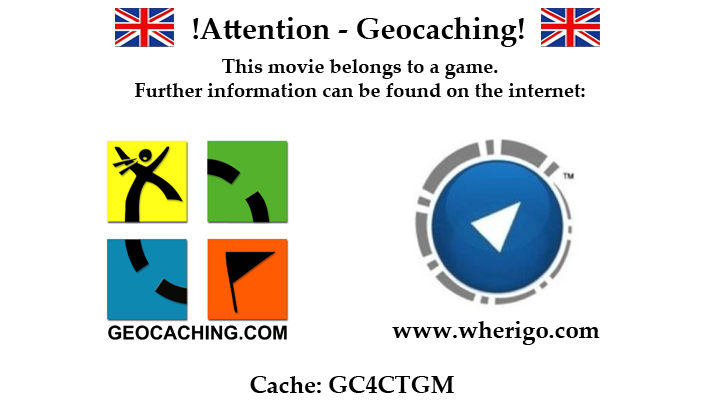
<style>
.page{position:relative;width:720px;height:405px;background:#ffffff}
.page>*{position:absolute;margin:0}
.t1{font:30px "PalatinoLinotype-Bold";color:#000000}
.t2{font:20px "PalatinoLinotype-Bold";color:#000000}
.t3{font:24px "PalatinoLinotype-Bold";color:#000000}
</style>
<div class="page">
<p class="t1" style="left:193px;top:17px;width:331px;height:30px">!Attention - Geocaching!</p>
<p class="t2" style="left:135px;top:59px;width:450px;height:38px;text-align:center">This movie belongs to a game. <br>Further information can be found on the internet:</p>
<p class="t3" style="left:392px;top:321px;width:208px;height:24px">www.wherigo.com</p>
<p class="t3" style="left:250px;top:376px;width:204px;height:17px">Cache: GC4CTGM</p>
</div>
